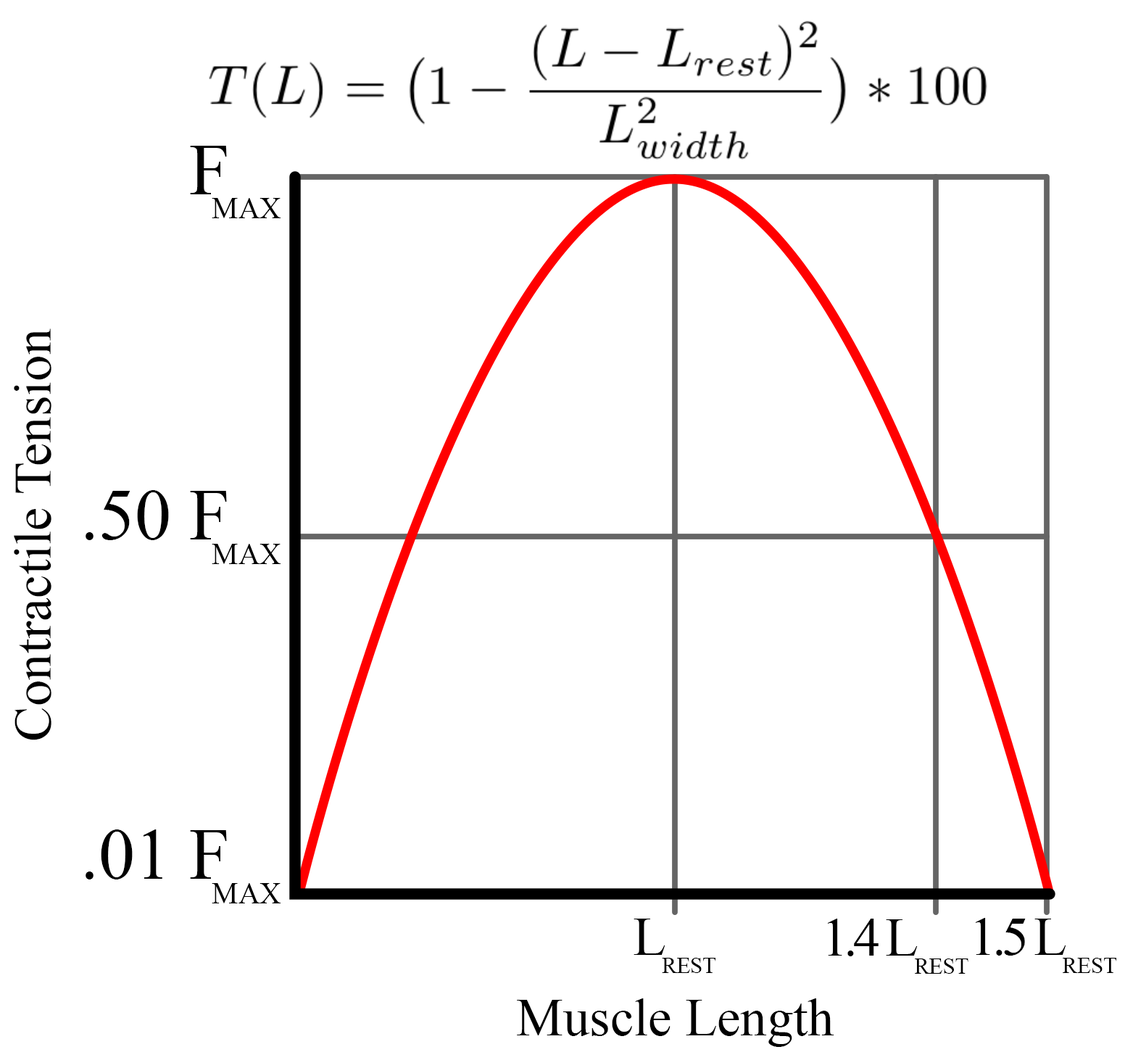
<style>
.page{position:relative;width:1125px;height:1060px;background:#ffffff}
.page>*{position:absolute;margin:0}
.t1{font:72.5px "TimesNewRomanPSMT";color:#000000;font-variant:small-caps}
.t2{font:72.5px "TimesNewRomanPSMT";letter-spacing:-0.24em;color:#000000}
.t3{font:52.8px "TimesNewRomanPSMT";color:#000000}
.t4{font:72.5px "TimesNewRomanPSMT";color:#000000}
.t5{font:54.4px "TimesNewRomanPSMT";letter-spacing:-0.08em;color:#000000}
.t6{font:54.4px "TimesNewRomanPSMT";color:#000000;font-variant:small-caps}
</style>
<div class="page">
<p class="t1" style="left:190px;top:146px;width:91px;height:72px"><span class="t2">F</span>max</p>
<p class="t3" style="left:14px;top:328px;width:37px;height:412px;rotate:-90deg">Contractile Tension</p>
<p class="t4" style="left:86px;top:490px;width:195px;height:74px">.50 <span class="t2">F</span><span class="t1">max</span></p>
<p class="t4" style="left:86px;top:829px;width:195px;height:74px">.01 <span class="t2">F</span><span class="t1">max</span></p>
<p class="t5" style="left:975px;top:918px;width:142px;height:55px">1.5 L<span class="t6">rest</span></p>
<p class="t6" style="left:634px;top:918px;width:82px;height:55px"><span class="t5">L</span>rest</p>
<p class="t5" style="left:827px;top:918px;width:142px;height:56px">1.4 L<span class="t6">rest</span></p>
<p class="t3" style="left:517px;top:998px;width:317px;height:49px">Muscle Length</p>
</div>
